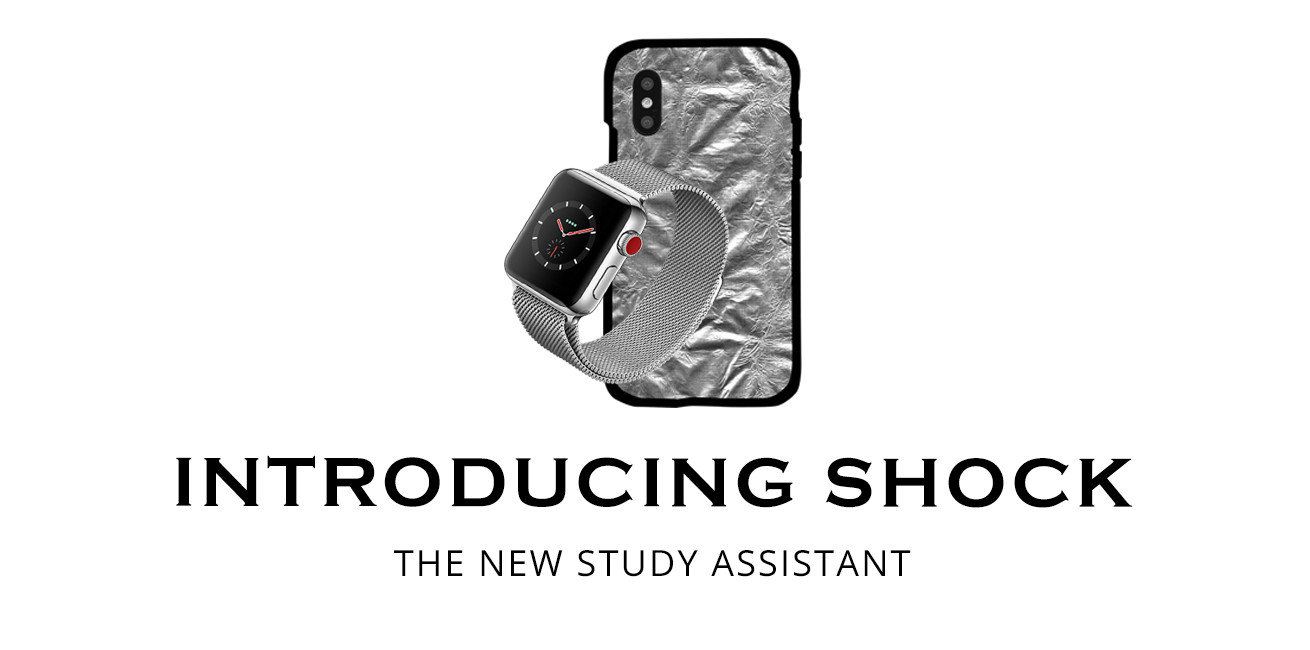
<style>
.page{position:relative;width:1310px;height:650px;background:#ffffff}
.page>*{position:absolute;margin:0}
.t1{font:72px "CopperplateGothic-Bold";letter-spacing:0.06em;color:#000000}
.t2{font:36px "OpenSans";letter-spacing:0.06em;color:#000000}
</style>
<div class="page">
<p class="t1" style="left:176px;top:455px;width:957px;height:53px">INTRODUCING SHOCK</p>
<p class="t2" style="left:394px;top:550px;width:517px;height:27px">THE NEW STUDY ASSISTANT</p>
</div>
